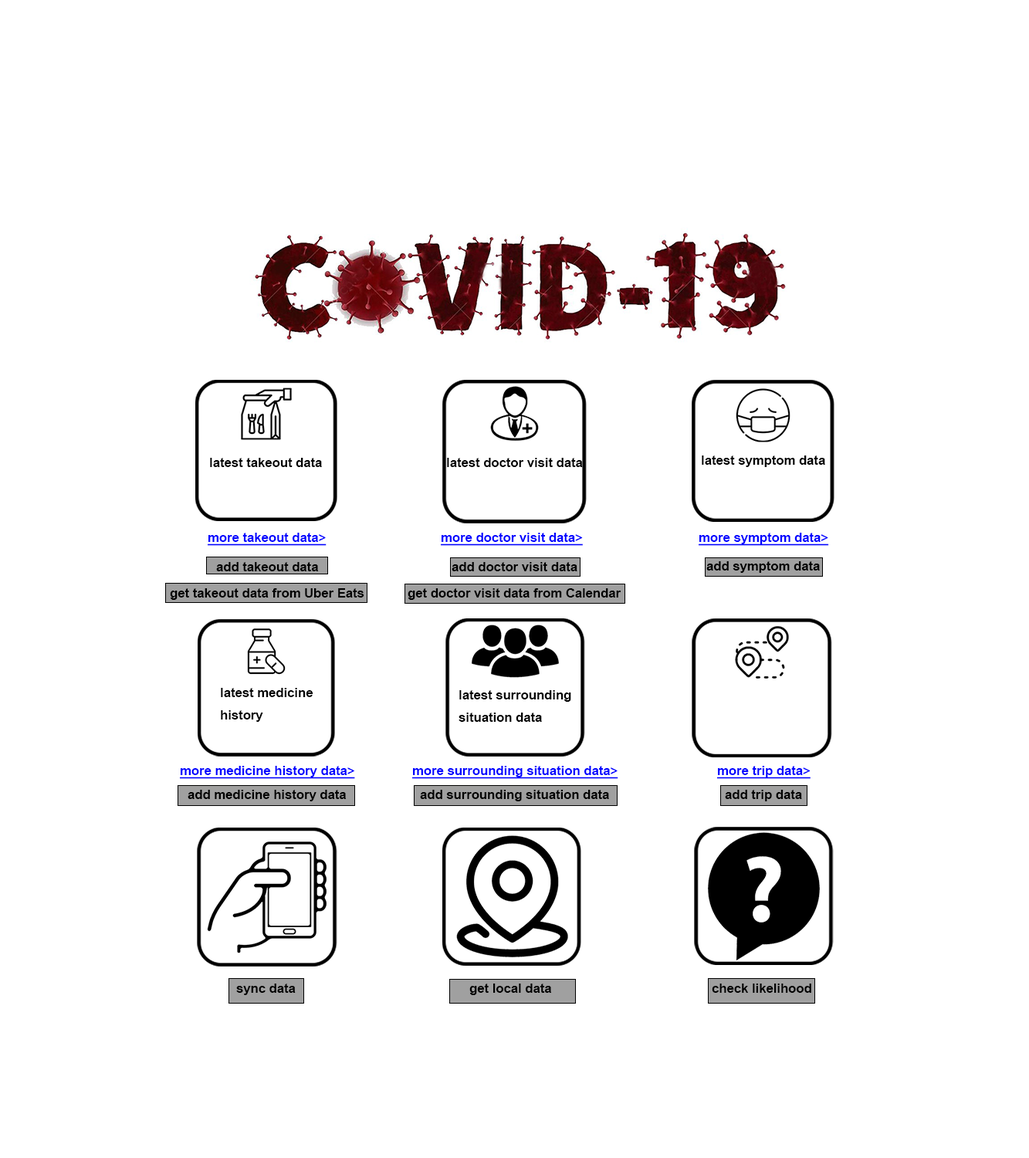
<style>
.page{position:relative;width:1029px;height:1158px;background:#ffffff}
.page>*{position:absolute;margin:0}
.t1{font:12.9px "Arial-BoldMT";color:#000000}
.t2{font:12.9px "Arial-BoldMT";color:#0000ff;text-decoration:underline}
</style>
<div class="page">
<p class="t1" style="left:210px;top:458px;width:112px;height:9px">latest takeout data</p>
<p class="t1" style="left:447px;top:458px;width:136px;height:9px">latest doctor visit data</p>
<p class="t1" style="left:702px;top:456px;width:124px;height:11px">latest symptom data</p>
<p class="t2" style="left:208px;top:533px;width:119px;height:13px">more takeout data&gt;</p>
<p class="t2" style="left:441px;top:533px;width:142px;height:13px">more doctor visit data&gt;</p>
<p class="t2" style="left:699px;top:533px;width:130px;height:13px">more symptom data&gt;</p>
<p class="t1" style="left:216px;top:562px;width:103px;height:9px">add takeout data</p>
<p class="t1" style="left:452px;top:562px;width:126px;height:9px">add doctor visit data</p>
<p class="t1" style="left:707px;top:561px;width:113px;height:12px">add symptom data</p>
<p class="t1" style="left:170px;top:588px;width:195px;height:12px">get takeout data from Uber Eats</p>
<p class="t1" style="left:408px;top:588px;width:214px;height:12px">get doctor visit data from Calendar</p>
<p class="t1" style="left:221px;top:688px;width:93px;height:34px">latest medicine<br>history</p>
<p class="t1" style="left:459px;top:690px;width:112px;height:32px">latest surrounding<br>situation data</p>
<p class="t2" style="left:180px;top:766px;width:175px;height:13px">more medicine history data&gt;</p>
<p class="t2" style="left:412px;top:766px;width:207px;height:13px">more surrounding situation data&gt;</p>
<p class="t2" style="left:717px;top:766px;width:94px;height:13px">more trip data&gt;</p>
<p class="t1" style="left:188px;top:790px;width:159px;height:12px">add medicine history data</p>
<p class="t1" style="left:420px;top:790px;width:189px;height:12px">add surrounding situation data</p>
<p class="t1" style="left:725px;top:790px;width:77px;height:12px">add trip data</p>
<p class="t1" style="left:236px;top:984px;width:60px;height:11px">sync data</p>
<p class="t1" style="left:470px;top:984px;width:82px;height:11px">get local data</p>
<p class="t1" style="left:712px;top:984px;width:100px;height:9px">check likelihood</p>
</div>
